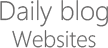
<style>
.page{position:relative;width:108px;height:48px;background:#ffffff}
.page>*{position:absolute;margin:0}
.t1{font:26.6px "SegoeWPN-Light";color:#676666}
.t2{font:22.6px "SegoeWPN-Light";color:#676666}
</style>
<div class="page">
<p class="t1" style="left:0px;top:0px;width:108px;height:48px;text-align:center">Daily blog<br><span class="t2">Websites</span></p>
</div>
